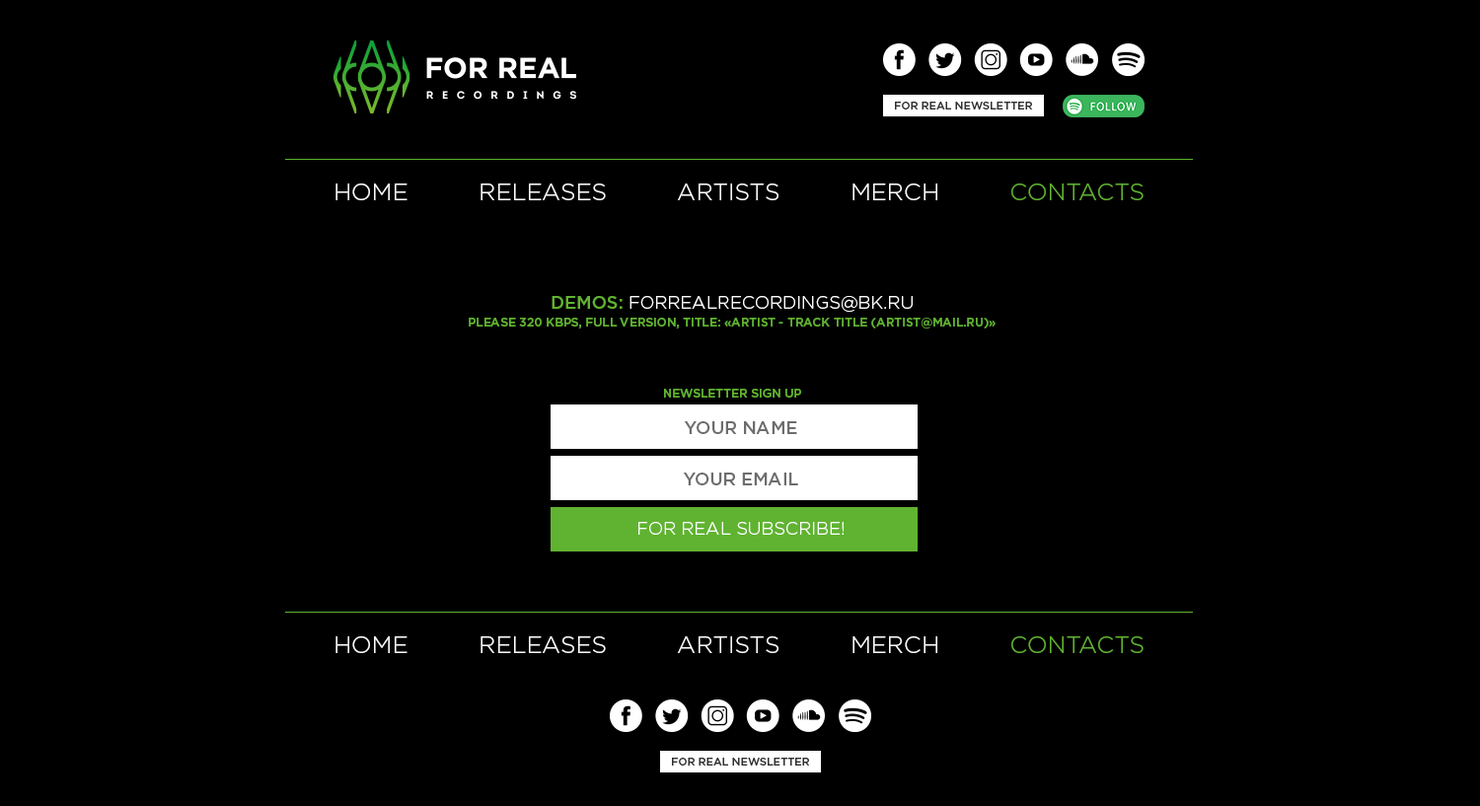
<style>
.page{position:relative;width:1480px;height:806px;background:#000000}
.page>*{position:absolute;margin:0}
.t1{font:10.9px "GothamPro-Medium";letter-spacing:-0.001em;color:#303030;text-transform:uppercase}
.t2{font:23.7px "GothamPro-Light";letter-spacing:-0.001em;color:#ffffff;text-transform:uppercase}
.t3{font:23.7px "GothamPro-Light";letter-spacing:-0.001em;color:#60b330;text-transform:uppercase}
.t4{font:11.8px/17.8px "GothamPro-Medium";letter-spacing:-0.001em;color:#60b330;text-transform:uppercase}
.t5{font:17.8px/25.7px "GothamPro-Medium";letter-spacing:-0.001em;color:#60b330;text-transform:uppercase}
.t6{font:17.8px/25.7px "GothamPro-Light";letter-spacing:-0.001em;color:#ffffff;text-transform:uppercase}
.t7{font:11.8px "GothamPro-Medium";letter-spacing:-0.001em;color:#60b330;text-transform:uppercase}
.t8{font:17.8px "GothamPro-Medium";letter-spacing:-0.001em;color:#6d6d6d;text-transform:uppercase}
.t9{font:17.8px "GothamPro-Light";letter-spacing:-0.001em;color:#ffffff;text-transform:uppercase}
</style>
<div class="page">
<p class="t1" style="left:895px;top:102px;width:138px;height:7px">for real NEWSLETTER</p>
<p class="t2" style="left:335px;top:183px;width:808px;height:17px">HOME          RELEASES          ARTISTS          MERCH          <span class="t3">CONTACTS</span></p>
<p class="t4" style="left:469px;top:296px;width:526px;height:32px;text-align:center"><span class="t5">Demos: </span><span class="t6">forrealrecordings@bk.ru<br></span>please 320 kbps, full version, title: «Artist - Track title (artist@mail.ru)»</p>
<p class="t7" style="left:664px;top:389px;width:137px;height:9px">Newsletter sign up</p>
<p class="t8" style="left:684px;top:421px;width:113px;height:13px">Your NAME</p>
<p class="t8" style="left:683px;top:472px;width:115px;height:13px">Your email</p>
<p class="t9" style="left:638px;top:522px;width:205px;height:13px">FOR REAL SUBSCRIBE!</p>
<p class="t2" style="left:335px;top:636px;width:808px;height:17px">HOME          RELEASES          ARTISTS          MERCH          <span class="t3">CONTACTS</span></p>
<p class="t1" style="left:672px;top:758px;width:138px;height:7px">for real NEWSLETTER</p>
</div>
